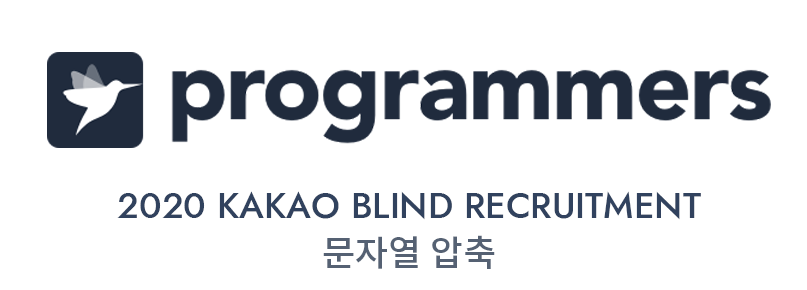
<style>
.page{position:relative;width:807px;height:290px;background:#ffffff}
.page>*{position:absolute;margin:0}
.t1{font:36px/48px "Jost-Medium";color:#31425e}
.t2{font:36px/48px "NotoSansKR-Medium";color:#556173}
</style>
<div class="page">
<p class="t1" style="left:117px;top:191px;width:584px;height:78px;text-align:center">2020 KAKAO BLIND RECRUITMENT<span class="t2">문자열 압축</span></p>
</div>
